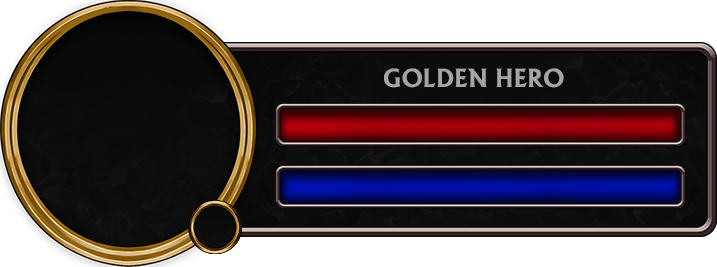
<style>
.page{position:relative;width:717px;height:267px;background:#ffffff}
.page>*{position:absolute;margin:0}
.t1{font:24px "AlbertusBold-Regular";color:#a5a5a5}
</style>
<div class="page">
<p class="t1" style="left:384px;top:68px;width:180px;height:20px">GOLDEN HERO</p>
</div>
